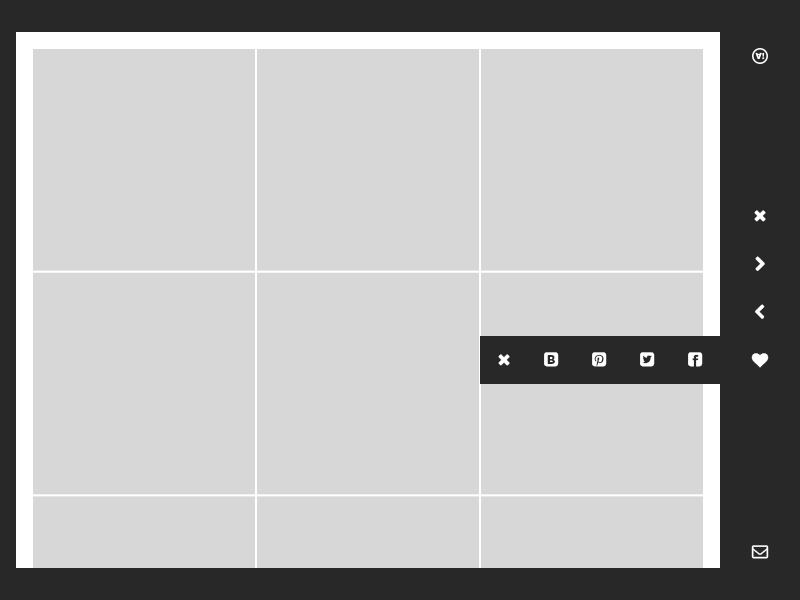
<style>
.page{position:relative;width:800px;height:600px;background:#d7d7d7}
.page>*{position:absolute;margin:0}
.t1{font:12px "HelveticaNeueCyr-Heavy";color:#282828}
</style>
<div class="page">
<p class="t1" style="left:547px;top:355px;width:8px;height:9px">В</p>
</div>
